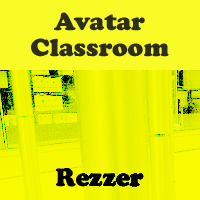
<style>
.page{position:relative;width:200px;height:200px;background:#f9fb26}
.page>*{position:absolute;margin:0}
.t1{font:26px/26px "CooperBlack";color:#2e2e20}
</style>
<div class="page">
<p class="t1" style="left:31px;top:12px;width:138px;height:175px;text-align:center">Avatar <br>Classroom<br><br><br><br><br>Rezzer</p>
</div>
